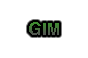
<style>
.page{position:relative;width:88px;height:58px;background:#ffffff}
.page>*{position:absolute;margin:0}
.t1{font:16px "H2gtrE"}
</style>
<div class="page">
<p class="t1" style="left:29px;top:22px;width:30px;height:13px">GIM</p>
</div>
